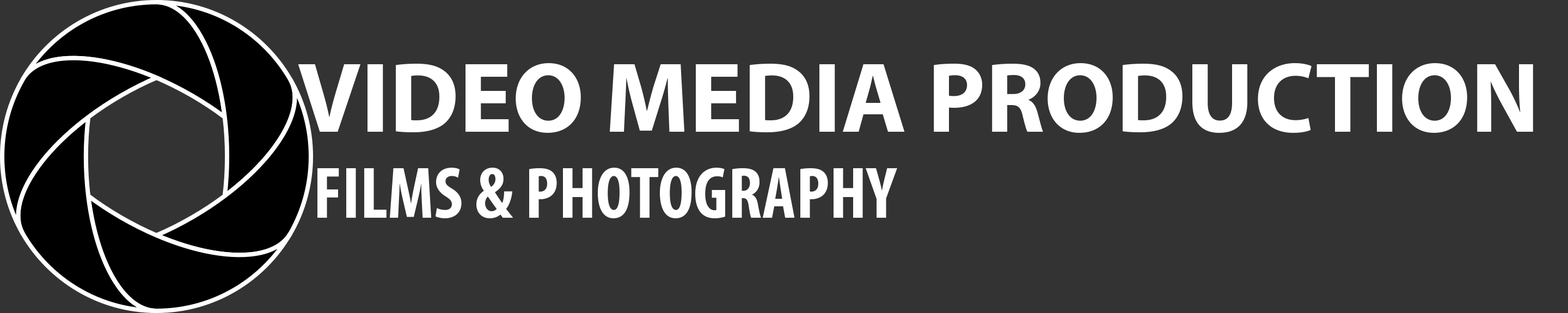
<style>
.page{position:relative;width:1568px;height:313px;background:#333333}
.page>*{position:absolute;margin:0}
.t1{font:100.2px "MyriadPro-Bold";color:#ffffff}
.t2{font:73.1px "MyriadPro-BoldCond";color:#ffffff}
</style>
<div class="page">
<p class="t1" style="left:298px;top:63px;width:1235px;height:70px">VIDEO MEDIA PRODUCTION</p>
<p class="t2" style="left:317px;top:168px;width:580px;height:50px">FILMS &amp; PHOTOGRAPHY</p>
</div>
